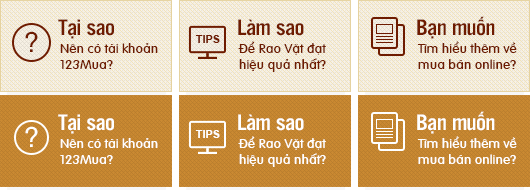
<style>
.page{position:relative;width:530px;height:192px}
.page>*{position:absolute;margin:0}
.t1{font:23.4px "UTM-Alter-Gothic";letter-spacing:-0.025em;color:#6e1b00;scale:1.11 1}
.t2{font:27.8px "UTM-Helve";color:#6e1b00}
.t3{font:11px "Arial-BoldMT";color:#6e1b00}
.t4{font:12.6px/16px "Arial-Rounded";color:#6e1b00;scale:1.11 1}
.t5{font:23.4px "UTM-Alter-Gothic";letter-spacing:-0.025em;color:#ffffff;scale:1.11 1}
.t6{font:27.8px "UTM-Helve";color:#ffffff}
.t7{font:11px "Arial-BoldMT";color:#ffffff}
.t8{font:12.6px/16px "Arial-Rounded";color:#ffffff;scale:1.11 1}
</style>
<div class="page">
<p class="t1" style="left:417px;top:16px;width:78px;height:23px">Bạn muốn</p>
<p class="t1" style="left:58px;top:19px;width:56px;height:20px">Tại sao</p>
<p class="t1" style="left:238px;top:19px;width:66px;height:17px">Làm sao</p>
<p class="t2" style="left:25px;top:31px;width:13px;height:21px">?</p>
<p class="t3" style="left:195px;top:35px;width:25px;height:8px">TIPS</p>
<p class="t4" style="left:238px;top:41px;width:88px;height:31px">Để Rao Vặt đạt<br>hiệu quả nhất?</p>
<p class="t4" style="left:417px;top:41px;width:100px;height:28px">Tìm hiểu thêm về<br>mua bán online?</p>
<p class="t4" style="left:60px;top:43px;width:98px;height:26px">Nên có tài khoản <br>123Mua?</p>
<p class="t5" style="left:417px;top:111px;width:78px;height:23px">Bạn muốn</p>
<p class="t6" style="left:25px;top:126px;width:13px;height:21px">?</p>
<p class="t5" style="left:58px;top:114px;width:56px;height:20px">Tại sao</p>
<p class="t5" style="left:238px;top:114px;width:66px;height:17px">Làm sao</p>
<p class="t7" style="left:195px;top:130px;width:25px;height:8px">TIPS</p>
<p class="t8" style="left:238px;top:136px;width:88px;height:31px">Để Rao Vặt đạt<br>hiệu quả nhất?</p>
<p class="t8" style="left:417px;top:136px;width:100px;height:28px">Tìm hiểu thêm về<br>mua bán online?</p>
<p class="t8" style="left:60px;top:138px;width:98px;height:26px">Nên có tài khoản <br>123Mua?</p>
</div>
